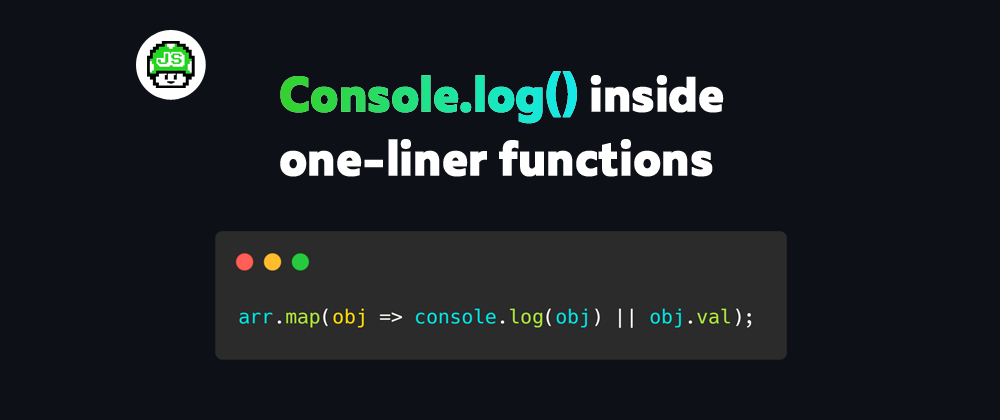
<style>
.page{position:relative;width:1000px;height:420px;background:#0d1117}
.page>*{position:absolute;margin:0}
.t1{font:49px/64px "MullerExtraBoldDEMO";color:#ffffff;font-weight:bold;scale:0.94 1}
</style>
<div class="page">
<p class="t1" style="left:280px;top:71px;width:444px;height:106px">Console.log() inside<br>one-liner functions</p>
</div>
